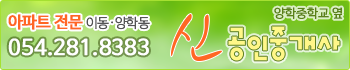
<style>
.page{position:relative;width:350px;height:70px}
.page>*{position:absolute;margin:0}
.t1{font:16px "NanumBarunGothicOTF";letter-spacing:-0.03em;color:#ff6724;font-weight:bold}
.t2{font:13px "NanumBarunGothicOTFUltraLight";letter-spacing:-0.03em;color:#555555;font-weight:bold}
.t3{font:12px "NanumBarunGothicOTFLight";color:#5b8119;font-weight:bold}
.t4{font:21px "NanumBarunGothicOTF";color:#ffffff;font-weight:bold}
</style>
<div class="page">
<p class="t1" style="left:8px;top:14px;width:142px;height:16px">아파트 전문 <span class="t2">이동·양학동</span></p>
<p class="t3" style="left:274px;top:7px;width:69px;height:12px">양학중학교 옆</p>
<p class="t4" style="left:8px;top:38px;width:141px;height:18px">054.281.8383</p>
</div>
